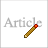
<style>
.page{position:relative;width:48px;height:48px;background:#ffffff}
.page>*{position:absolute;margin:0}
.t1{font:14px "Times-Roman";color:#b2b2b2}
</style>
<div class="page">
<p class="t1" style="left:3px;top:17px;width:40px;height:11px">Article</p>
</div>
